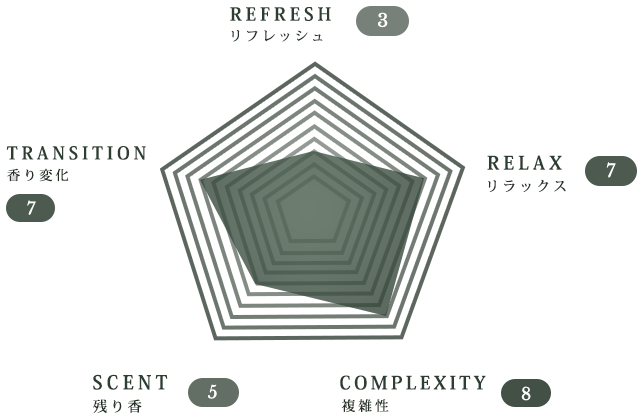
<style>
.page{position:relative;width:640px;height:420px;background:#ffffff}
.page>*{position:absolute;margin:0}
.t1{font:17.9px "KozMinPr6N-Bold";letter-spacing:0.22em;color:#27452e}
.t2{font:17.9px "LibreBaskerville-Regular";letter-spacing:0.06em;color:#ffffff}
.t3{font:13.4px "KozMinPr6N-Medium";letter-spacing:0.22em;color:#253125}
.t4{font:17.5px "KozMinPr6N-Bold";letter-spacing:0.22em;color:#27452e}
.t5{font:18.4px "KozMinPr6N-Bold";letter-spacing:0.22em;color:#27452e}
.t6{font:13.1px "KozMinPr6N-Medium";letter-spacing:0.22em;color:#20381f}
.t7{font:17.7px "LibreBaskerville-Regular";letter-spacing:0.06em;color:#ffffff}
.t8{font:13.8px "KozMinPr6N-Medium";letter-spacing:0.22em;color:#20381f}
.t9{font:16.8px "LibreBaskerville-Regular";letter-spacing:0.06em;color:#ffffff}
.t10{font:18.9px "KozMinPr6N-Bold";letter-spacing:0.22em;color:#27452e}
.t11{font:18.2px "KozMinPr6N-Bold";letter-spacing:0.18em;color:#27452e}
.t12{font:17.4px "LibreBaskerville-Regular";letter-spacing:0.06em;color:#ffffff}
.t13{font:17.1px "LibreBaskerville-Regular";letter-spacing:0.06em;color:#ffffff}
.t14{font:14.2px "KozMinPr6N-Medium";letter-spacing:0.22em;color:#20381f}
.t15{font:13.7px "KozMinPr6N-Medium";letter-spacing:0.22em;color:#253125}
</style>
<div class="page">
<p class="t1" style="left:230px;top:7px;width:101px;height:14px">REFRESH</p>
<p class="t2" style="left:378px;top:12px;width:10px;height:16px">3</p>
<p class="t3" style="left:231px;top:30px;width:92px;height:12px">リフレッシュ</p>
<p class="t4" style="left:6px;top:146px;width:140px;height:14px">TRANSITION</p>
<p class="t5" style="left:487px;top:155px;width:75px;height:15px">RELAX</p>
<p class="t6" style="left:7px;top:168px;width:62px;height:14px">香り変化</p>
<p class="t7" style="left:606px;top:162px;width:10px;height:16px">7</p>
<p class="t8" style="left:488px;top:179px;width:78px;height:13px">リラックス</p>
<p class="t9" style="left:27px;top:200px;width:9px;height:15px">7</p>
<p class="t10" style="left:93px;top:374px;width:75px;height:16px">SCENT</p>
<p class="t11" style="left:340px;top:375px;width:146px;height:15px">COMPLEXITY</p>
<p class="t12" style="left:208px;top:384px;width:9px;height:15px">5</p>
<p class="t13" style="left:521px;top:386px;width:10px;height:15px">8</p>
<p class="t14" style="left:93px;top:399px;width:49px;height:14px">残り香</p>
<p class="t15" style="left:341px;top:399px;width:48px;height:14px">複雑性</p>
</div>
